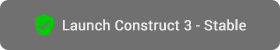
<style>
.page{position:relative;width:280px;height:50px;background:#707070}
.page>*{position:absolute;margin:0}
.t1{font:14px "Roboto-Regular";color:#eaeaea;font-weight:bold}
</style>
<div class="page">
<p class="t1" style="left:63px;top:19px;width:183px;height:12px">Launch Construct 3 - Stable</p>
</div>
